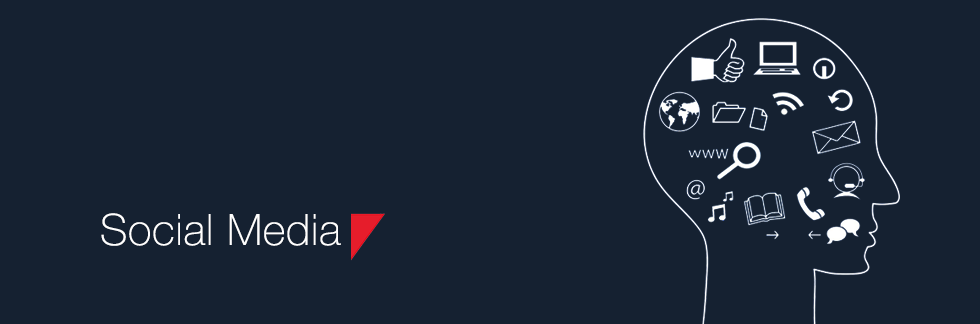
<style>
.page{position:relative;width:980px;height:324px;background:#152131}
.page>*{position:absolute;margin:0}
.t1{font:43.2px "HelveticaNeue-Thin";letter-spacing:0.02em;color:#ffffff}
</style>
<div class="page">
<p class="t1" style="left:101px;top:213px;width:240px;height:33px">Social Media</p>
</div>
